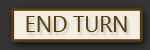
<style>
.page{position:relative;width:150px;height:50px;background:#f6eee2}
.page>*{position:absolute;margin:0}
.t1{font:21.6px "SegoeUI";color:#513e11}
</style>
<div class="page">
<p class="t1" style="left:26px;top:16px;width:101px;height:16px">END TURN</p>
</div>
